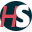
<style>
.page{position:relative;width:32px;height:32px;background:#ffffff}
.page>*{position:absolute;margin:0}
.t1{font:30px "SegoeUI-SemiboldItalic";color:#d94b58;scale:0.85 1}
.t2{font:31.3px "SegoeUIBlack";color:#ffffff;scale:0.84 1}
</style>
<div class="page">
<p class="t1" style="left:0px;top:6px;width:19px;height:21px">H</p>
<p class="t2" style="left:16px;top:4px;width:14px;height:24px">S</p>
</div>
